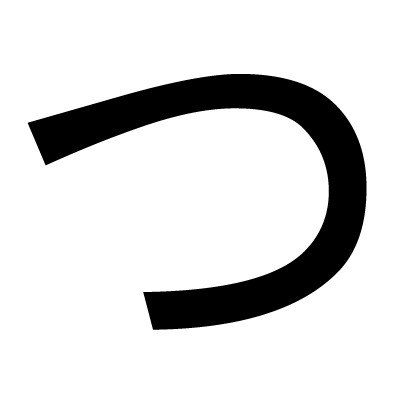
<style>
.page{position:relative;width:400px;height:400px;background:#ffffff}
.page>*{position:absolute;margin:0}
.t1{font:416.7px "MS-PGothic";color:#000000}
</style>
<div class="page">
<p class="t1" style="left:27px;top:74px;width:340px;height:256px">つ</p>
</div>
